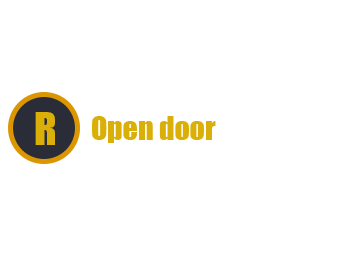
<style>
.page{position:relative;width:350px;height:256px;background:#ffffff}
.page>*{position:absolute;margin:0}
.t1{font:41.7px "Impact";color:#dab008}
.t2{font:29.8px "Impact";color:#dab008}
</style>
<div class="page">
<p class="t1" style="left:35px;top:112px;width:20px;height:33px">R</p>
<p class="t2" style="left:92px;top:116px;width:124px;height:27px">Open door</p>
</div>
